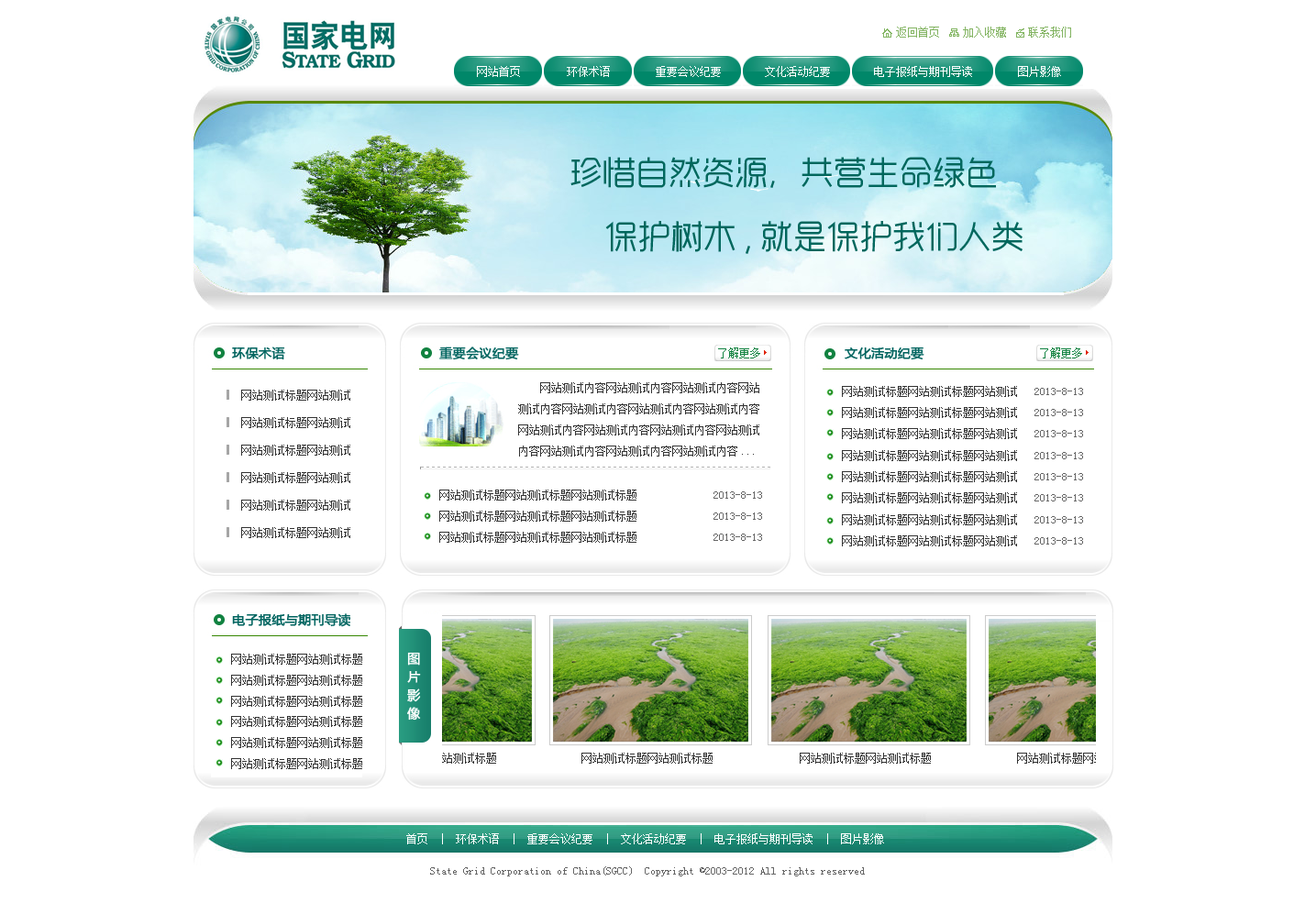
<style>
.page{position:relative;width:1305px;height:914px;background:#ffffff}
.page>*{position:absolute;margin:0}
.t1{font:11px "SimSun";color:#ffffff}
.t2{font:33px "RTWSYueGoTrial-Regular";color:#00675d}
.t3{font:12.8px "MicrosoftYaHei";color:#00645f;font-weight:bold}
.t4{font:11px/27.5px "SimSun";color:#333333}
.t5{font:11px/21.1px "SimSun";color:#333333}
.t6{font:11px/21.1px "SimSun";color:#666666}
.t7{font:12.8px/18.3px "MicrosoftYaHei";color:#ffffff;font-weight:bold}
.t8{font:11px "SimSun";color:#666666}
</style>
<div class="page">
<p class="t1" style="left:477px;top:66px;width:43px;height:11px">网站首页</p>
<p class="t1" style="left:567px;top:66px;width:43px;height:11px">环保术语</p>
<p class="t1" style="left:656px;top:66px;width:65px;height:11px">重要会议纪要</p>
<p class="t1" style="left:765px;top:66px;width:65px;height:11px">文化活动纪要</p>
<p class="t1" style="left:874px;top:66px;width:98px;height:11px">电子报纸与期刊导读</p>
<p class="t1" style="left:1018px;top:66px;width:43px;height:11px">图片影像</p>
<p class="t2" style="left:570px;top:157px;width:426px;height:31px">珍惜自然资源，共营生命绿色</p>
<p class="t2" style="left:605px;top:221px;width:417px;height:33px">保护树木,就是保护我们人类</p>
<p class="t3" style="left:232px;top:347px;width:53px;height:13px">环保术语</p>
<p class="t3" style="left:439px;top:347px;width:80px;height:13px">重要会议纪要</p>
<p class="t3" style="left:844px;top:347px;width:80px;height:13px">文化活动纪要</p>
<p class="t4" style="left:241px;top:390px;width:109px;height:148px">网站测试标题网站测试<br>网站测试标题网站测试<br>网站测试标题网站测试<br>网站测试标题网站测试<br>网站测试标题网站测试<br>网站测试标题网站测试</p>
<p class="t5" style="left:518px;top:382px;width:241px;height:75px">网站测试内容网站测试内容网站测试内容网站测试内容网站测试内容网站测试内容网站测试内容网站测试内容网站测试内容网站测试内容网站测试内容网站测试内容网站测试内容网站测试内容...</p>
<p class="t5" style="left:439px;top:490px;width:197px;height:53px">网站测试标题网站测试标题网站测试标题<br>网站测试标题网站测试标题网站测试标题<br>网站测试标题网站测试标题网站测试标题</p>
<p class="t6" style="left:713px;top:491px;width:49px;height:50px">2013-8-13<br>2013-8-13<br>2013-8-13</p>
<p class="t3" style="left:232px;top:613px;width:119px;height:14px">电子报纸与期刊导读</p>
<p class="t7" style="left:407px;top:652px;width:14px;height:69px">图<br>片<br>影<br>像</p>
<p class="t1" style="left:406px;top:833px;width:478px;height:11px">首页  |  环保术语  |  重要会议纪要  |  文化活动纪要  |  电子报纸与期刊导读  |  图片影像</p>
<p class="t8" style="left:430px;top:866px;width:435px;height:10px">State Grid Corporation of China(SGCC)  Copyright ©2003-2012 All rights reserved</p>
</div>
